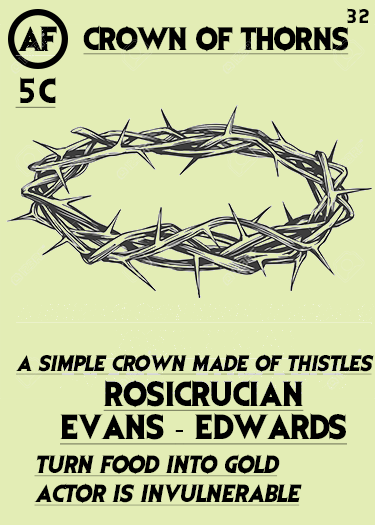
<style>
.page{position:relative;width:375px;height:525px;background:#e3edb5}
.page>*{position:absolute;margin:0}
.t1{font:16.7px "EvilDead";letter-spacing:-0.05em;color:#000000}
.t2{font:29.2px "EvilDead";letter-spacing:-0.05em;color:#000000}
.t3{font:27.1px "EvilDead";letter-spacing:-0.025em;color:#000000;text-decoration:underline}
.t4{font:29.2px "EvilDead";color:#000000;text-decoration:underline}
.t5{font:18.8px "EvilDead";color:#000000;font-style:italic;text-decoration:underline}
.t6{font:29.2px/33.3px "EvilDead";color:#000000;text-decoration:underline}
.t7{font:29.2px/33.3px "MyriadPro-Regular";color:#000000;text-decoration:underline}
.t8{font:20.8px/29.2px "EvilDead";color:#000000;font-style:italic;text-decoration:underline}
</style>
<div class="page">
<p class="t1" style="left:347px;top:8px;width:22px;height:15px">32</p>
<p class="t2" style="left:17px;top:26px;width:40px;height:25px">AF</p>
<p class="t3" style="left:83px;top:25px;width:266px;height:30px">CROWN OF THORNS</p>
<p class="t4" style="left:15px;top:77px;width:41px;height:31px">5C</p>
<p class="t5" style="left:16px;top:354px;width:358px;height:21px">A simple crown made of thistles</p>
<p class="t6" style="left:60px;top:380px;width:287px;height:65px;text-align:center">Rosicrucian<br>Evans <span class="t7">-</span> Edwards</p>
<p class="t8" style="left:34px;top:454px;width:268px;height:52px">Turn Food into Gold<br>Actor is invulnerable</p>
</div>
